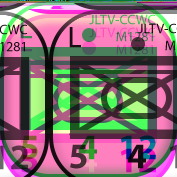
<style>
.page{position:relative;width:177px;height:177px}
.page>*{position:absolute;margin:0}
.t1{font:30px "MyriadPro-Regular"}
.t2{font:14px "MyriadPro-Regular"}
.t3{font:36px "MyriadPro-Bold"}
</style>
<div class="page">
<p class="t1" style="left:20px;top:17px;width:12px;height:21px">L</p>
<p class="t2" style="left:89px;top:13px;width:66px;height:28px;text-align:right">JLTV-CCWC<br>M1281</p>
<p class="t3" style="left:21px;top:134px;width:17px;height:25px">5</p>
<p class="t3" style="left:78px;top:134px;width:19px;height:25px">4</p>
<p class="t3" style="left:120px;top:134px;width:36px;height:25px">12</p>
</div>
